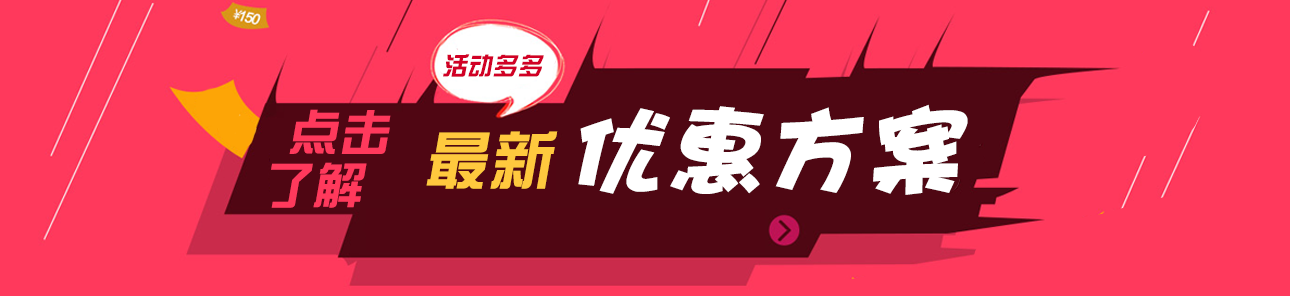
<style>
.page{position:relative;width:1290px;height:296px;background:#ff395c}
.page>*{position:absolute;margin:0}
.t1{font:24.7px "DFZongYi-Bd-80-Win-GB";letter-spacing:0.025em;color:#d10025;font-style:italic}
.t2{font:49.8px/53.4px "DFZongYi-Bd-80-Win-GB";letter-spacing:0.025em;color:#ff395c;font-style:italic}
.t3{font:96.9px "DFPHaiBaoW12";letter-spacing:0.025em;color:#ffffff;font-style:italic}
.t4{font:63.1px "DFZongYi-Bd-80-Win-GB";letter-spacing:0.025em;color:#ffc93e;font-style:italic}
</style>
<div class="page">
<p class="t1" style="left:443px;top:54px;width:101px;height:23px">活动多多</p>
<p class="t2" style="left:271px;top:109px;width:120px;height:99px">点击<br>了解</p>
<p class="t3" style="left:578px;top:104px;width:390px;height:91px">优惠方案</p>
<p class="t4" style="left:426px;top:131px;width:132px;height:58px">最新</p>
</div>
